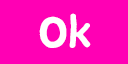
<style>
.page{position:relative;width:128px;height:64px;background:#ff00b4}
.page>*{position:absolute;margin:0}
.t1{font:48px "DuperPro-Bold";color:#ffffff}
</style>
<div class="page">
<p class="t1" style="left:39px;top:13px;width:52px;height:35px">Ok</p>
</div>
